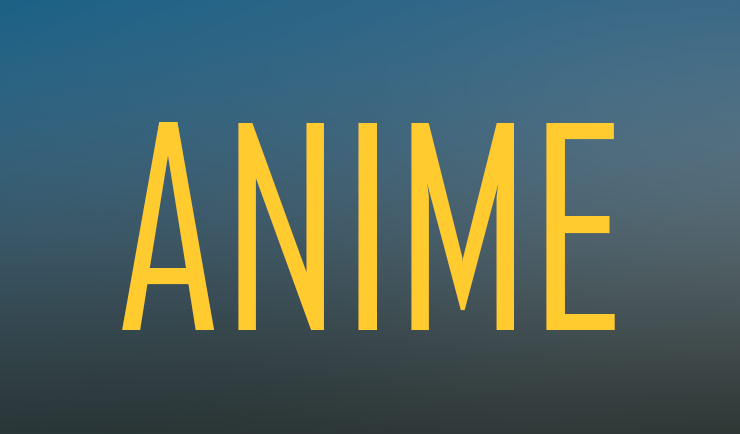
<style>
.page{position:relative;width:740px;height:434px}
.page>*{position:absolute;margin:0}
.t1{font:271.1px "AgencyFB-Reg";color:#ffcb2e}
</style>
<div class="page">
<p class="t1" style="left:122px;top:122px;width:493px;height:208px">ANIME</p>
</div>
